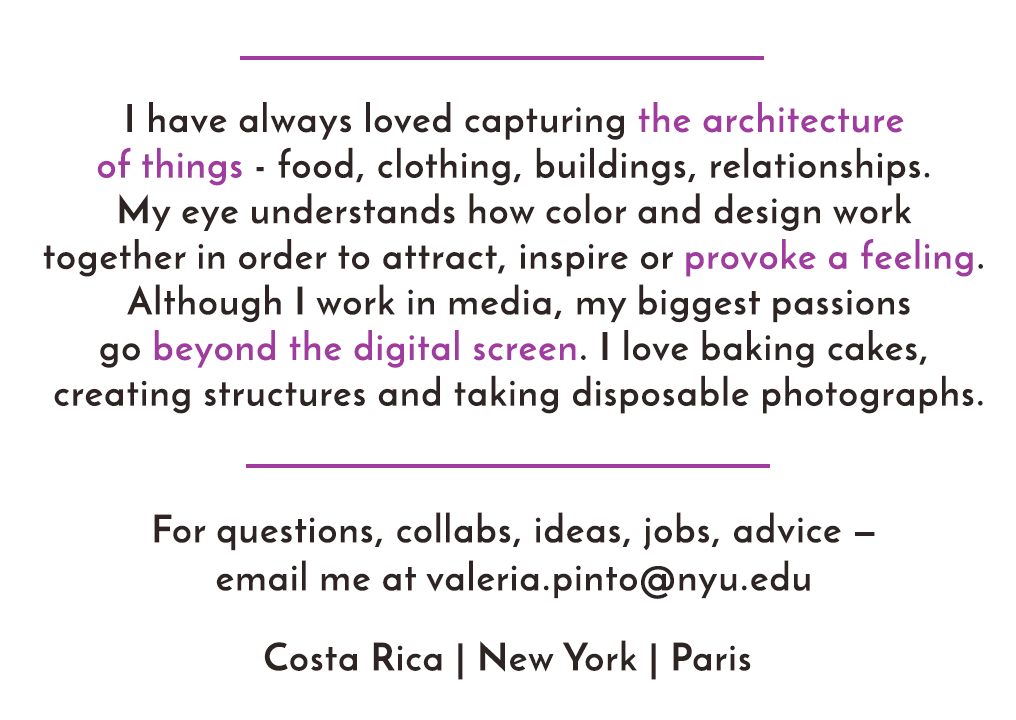
<style>
.page{position:relative;width:1016px;height:720px;background:#ffffff}
.page>*{position:absolute;margin:0}
.t1{font:38px "JosefinSans-Bold";letter-spacing:0.04em;color:#2f2424}
.t2{font:38px "JosefinSans-Bold";letter-spacing:0.04em;color:#a03ba0}
</style>
<div class="page">
<p class="t1" style="left:43px;top:102px;width:940px;height:497px;text-align:center">I have always loved capturing <span class="t2">the architecture <br>of things</span> - food, clothing, buildings, relationships. <br>My eye understands how color and design work <br>together in order to attract, inspire or <span class="t2">provoke a feeling</span>. <br>Although I work in media, my biggest passions<br>go <span class="t2">beyond the digital screen</span>. I love baking cakes, <br>creating structures and taking disposable photographs.<br><br><br>For questions, collabs, ideas, jobs, advice — <br>email me at valeria.pinto@nyu.edu</p>
<p class="t1" style="left:264px;top:640px;width:487px;height:40px">Costa Rica | New York | Paris</p>
</div>
